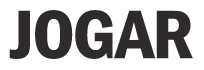
<style>
.page{position:relative;width:204px;height:70px;background:#ffffff}
.page>*{position:absolute;margin:0}
.t1{font:120.9px "FranklinGothic-DemiCond";letter-spacing:-0.06em;color:#302b2b;font-weight:bold;scale:1.08 1}
</style>
<div class="page">
<p class="t1" style="left:9px;top:10px;width:184px;height:49px">JOGAR</p>
</div>
